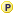
<style>
.page{position:relative;width:14px;height:14px;background:#ffffff}
.page>*{position:absolute;margin:0}
.t1{font:10px "GillSansMT-Bold";color:#2e2558}
</style>
<div class="page">
<p class="t1" style="left:5px;top:4px;width:6px;height:7px">P</p>
</div>
